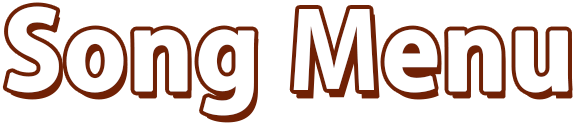
<style>
.page{position:relative;width:575px;height:124px;background:#ffffff}
.page>*{position:absolute;margin:0}
.t1{font:105px "AdobeGothicStd-Bold";color:#ffffff;font-weight:bold}
</style>
<div class="page">
<p class="t1" style="left:6px;top:6px;width:563px;height:110px">Song Menu</p>
</div>
